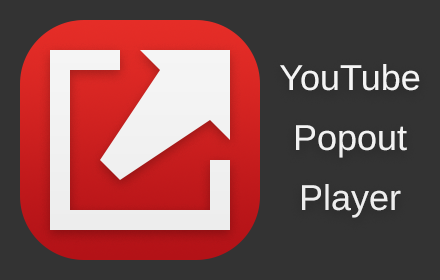
<style>
.page{position:relative;width:440px;height:280px;background:#333333}
.page>*{position:absolute;margin:0}
.t1{font:36px/60px "LiberationSans";color:#f4f4f4}
</style>
<div class="page">
<p class="t1" style="left:280px;top:64px;width:140px;height:154px;text-align:center">YouTube<br>Popout<br>Player</p>
</div>
